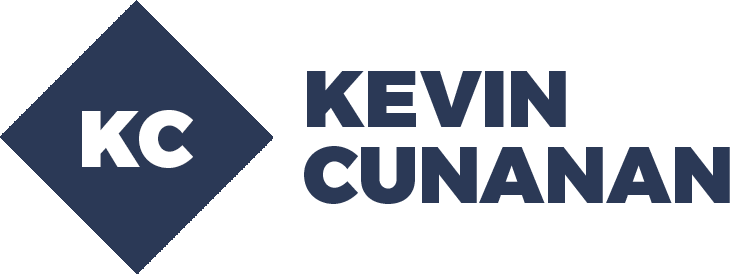
<style>
.page{position:relative;width:730px;height:274px;background:#ffffff}
.page>*{position:absolute;margin:0}
.t1{font:80px "Montserrat-Black";color:#2b3956}
.t2{font:80px "Montserrat-Black";color:#ffffff}
</style>
<div class="page">
<p class="t1" style="left:307px;top:71px;width:259px;height:56px">KEVIN</p>
<p class="t2" style="left:82px;top:110px;width:111px;height:58px">KC</p>
<p class="t1" style="left:304px;top:146px;width:426px;height:58px">CUNANAN</p>
</div>
